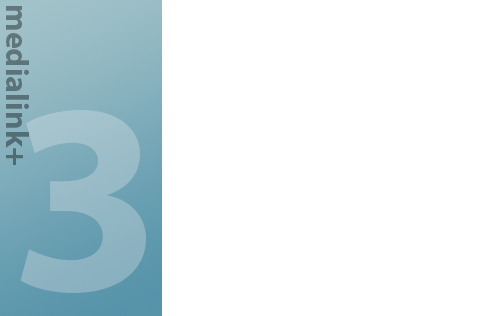
<style>
.page{position:relative;width:500px;height:316px;background:#ffffff}
.page>*{position:absolute;margin:0}
.t1{font:32.2px "MyriadPro-Bold";color:#5b7279}
.t2{font:273px "MyriadPro-Bold";color:#96b9c6}
</style>
<div class="page">
<p class="t1" style="left:6px;top:6px;width:23px;height:159px;rotate:90deg">medialink+</p>
<p class="t2" style="left:20px;top:110px;width:126px;height:183px">3</p>
</div>
